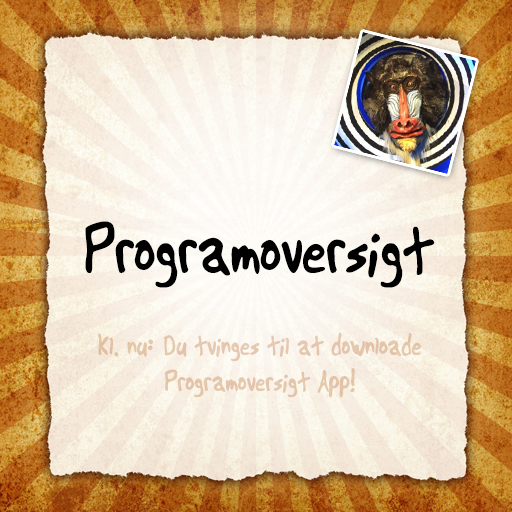
<style>
.page{position:relative;width:512px;height:512px}
.page>*{position:absolute;margin:0}
.t1{font:72px "Another";color:#000000}
.t2{font:30px "Another";color:#e5c6ab}
</style>
<div class="page">
<p class="t1" style="left:85px;top:221px;width:350px;height:67px">Programoversigt</p>
<p class="t2" style="left:98px;top:332px;width:324px;height:66px;text-align:center">Kl. nu: Du tvinges til at downloade<br>Programoversigt App!</p>
</div>
